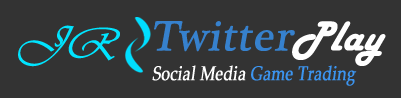
<style>
.page{position:relative;width:401px;height:98px;background:#333333}
.page>*{position:absolute;margin:0}
.t1{font:46px "Vivaldii";color:#00e4ff;font-weight:bold;font-style:italic}
.t2{font:43px "PlantagenetCherokee";color:#3681ce;font-weight:bold;font-style:italic}
.t3{font:43px "HarlowSolid";color:#ffffff;font-weight:bold;font-style:italic}
.t4{font:20px "PalatinoLinotype-Roman";color:#ffffff;font-weight:bold;font-style:italic;scale:0.78 1}
.t5{font:20px "PalatinoLinotype-Roman";color:#3b94ef;font-weight:bold;font-style:italic;scale:0.78 1}
</style>
<div class="page">
<p class="t1" style="left:18px;top:25px;width:102px;height:42px;rotate:4deg">JR</p>
<p class="t2" style="left:154px;top:21px;width:232px;height:45px">Twitter<span class="t3">Play</span></p>
<p class="t4" style="left:152px;top:65px;width:205px;height:21px">Social Media <span class="t5">Game Trading</span></p>
</div>
